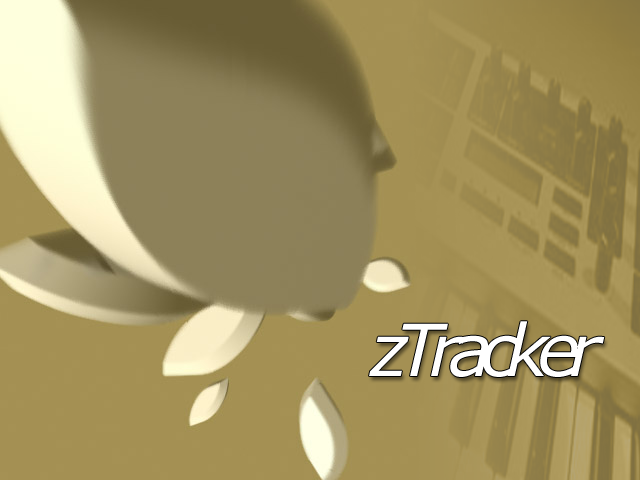
<style>
.page{position:relative;width:640px;height:480px;background:#a49053}
.page>*{position:absolute;margin:0}
.t1{font:72px "Verdana-Italic";letter-spacing:-0.159em;color:#ffffff}
</style>
<div class="page">
<p class="t1" style="left:369px;top:321px;width:236px;height:56px">zTracker</p>
</div>
